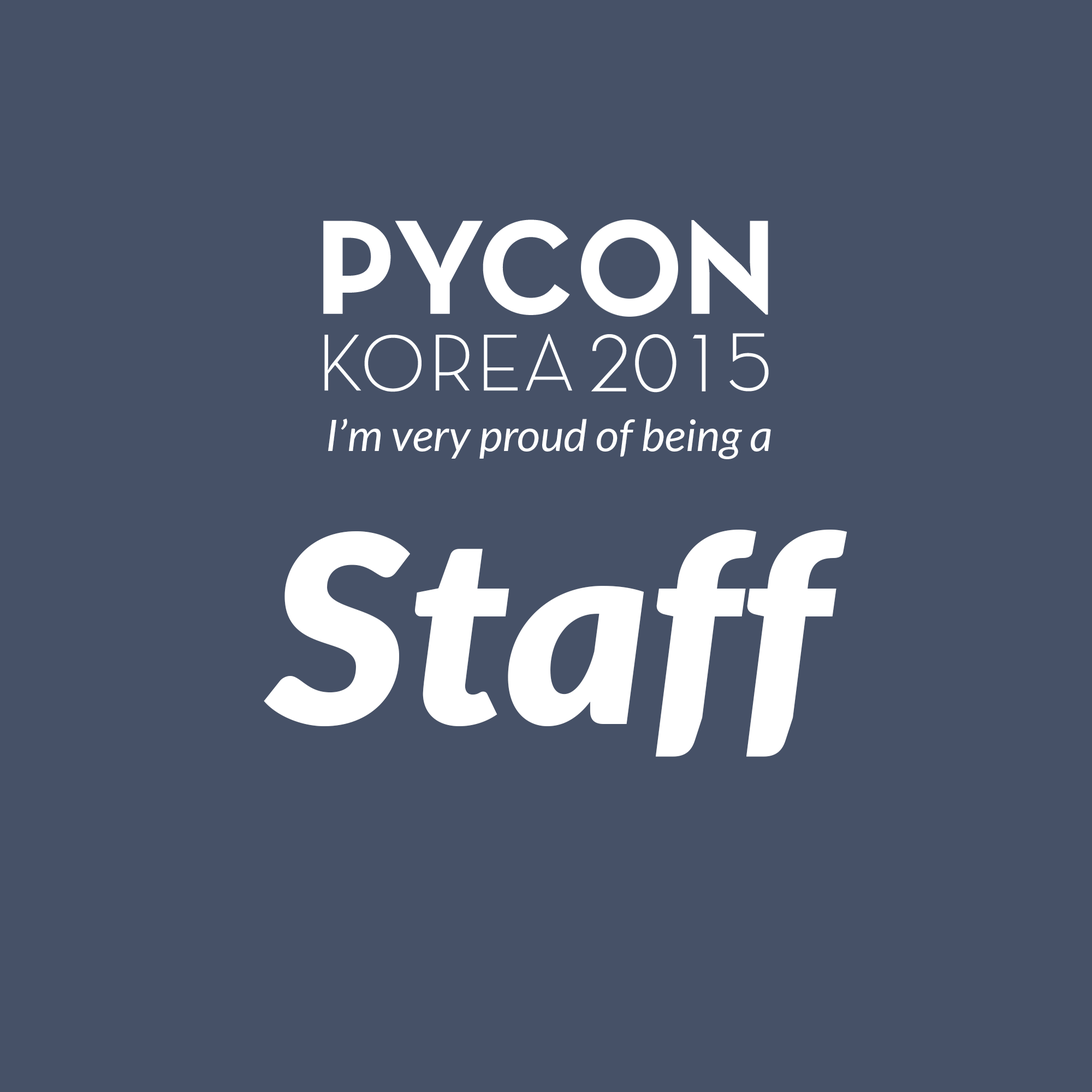
<style>
.page{position:relative;width:1092px;height:1092px;background:#465167}
.page>*{position:absolute;margin:0}
.t1{font:43.3px/273px "Lato-Italic";color:#ffffff;scale:1.04 1}
.t2{font:262.1px/273px "Lato-BlackItalic";color:#ffffff;scale:1.04 1}
</style>
<div class="page">
<p class="t1" style="left:264px;top:418px;width:583px;height:339px;text-align:center">I’m very proud of being a<br><span class="t2">Staff</span></p>
</div>
